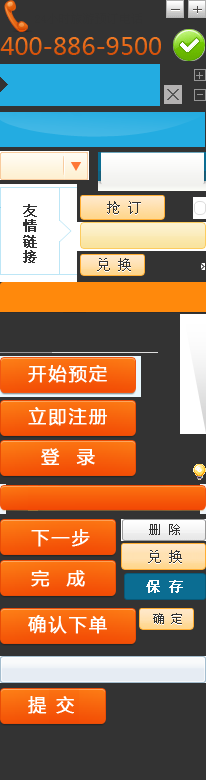
<style>
.page{position:relative;width:206px;height:780px;background:#333333}
.page>*{position:absolute;margin:0}
.t1{font:24px "MicrosoftYaHei";color:#e56816}
.t2{font:14px "SimSun";color:#323232}
.t3{font:18px "MicrosoftYaHei";letter-spacing:0.1em;color:#ffffff;font-weight:bold}
.t4{font:12px "SimSun";letter-spacing:0.1em;color:#323232}
.t5{font:14px "SimSun";color:#fefefe;font-weight:bold}
.t6{font:12px "SimSun";color:#323232}
</style>
<div class="page">
<p class="t1" style="left:0px;top:37px;width:161px;height:18px">400-886-9500</p>
<p class="t2" style="left:107px;top:201px;width:34px;height:13px">抢 订</p>
<p class="t2" style="left:97px;top:258px;width:34px;height:13px">兑 换</p>
<p class="t3" style="left:28px;top:407px;width:79px;height:19px">立即注册</p>
<p class="t3" style="left:41px;top:448px;width:54px;height:18px">登  录</p>
<p class="t3" style="left:31px;top:529px;width:59px;height:18px">下一步</p>
<p class="t4" style="left:149px;top:524px;width:31px;height:11px">删 除</p>
<p class="t2" style="left:148px;top:550px;width:34px;height:13px">兑 换</p>
<p class="t3" style="left:31px;top:570px;width:54px;height:17px">完  成</p>
<p class="t5" style="left:146px;top:580px;width:37px;height:13px">保 存</p>
<p class="t3" style="left:28px;top:615px;width:79px;height:19px">确认下单</p>
<p class="t6" style="left:153px;top:613px;width:29px;height:11px">确 定</p>
<p class="t3" style="left:28px;top:696px;width:46px;height:18px">提 交</p>
</div>
